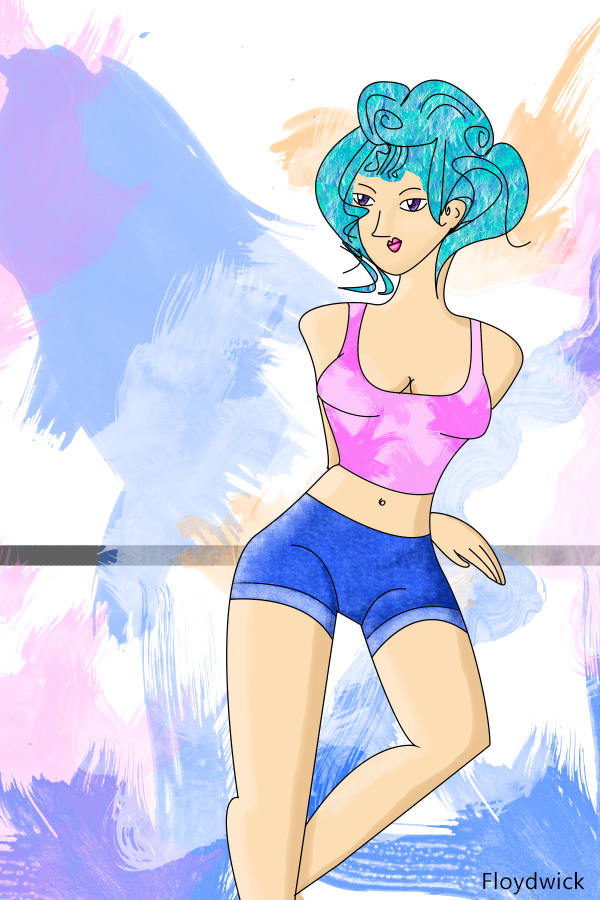
<style>
.page{position:relative;width:600px;height:900px;background:#ffffff}
.page>*{position:absolute;margin:0}
.t1{font:22.9px "MicrosoftPhagsPa";letter-spacing:0.025em;color:#000000}
</style>
<div class="page">
<p class="t1" style="left:483px;top:872px;width:102px;height:23px">Floydwick</p>
</div>
